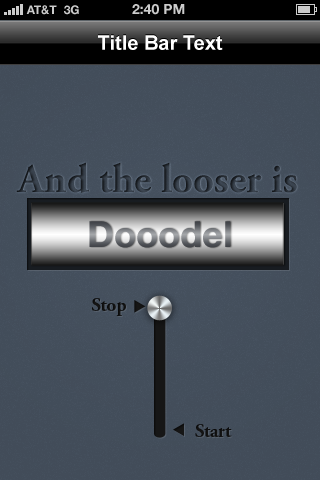
<style>
.page{position:relative;width:320px;height:480px}
.page>*{position:absolute;margin:0}
.t1{font:12px "HelveticaNeue-Bold";color:#cccccc}
.t2{font:14px "HelveticaNeue-Bold";color:#cccccc}
.t3{font:20px "Arial-BoldMT";color:#ffffff}
.t4{font:36px "HelveticaNeue-Bold";color:#ffffff}
</style>
<div class="page">
<p class="t1" style="left:26px;top:5px;width:31px;height:10px">AT&amp;T</p>
<p class="t1" style="left:64px;top:5px;width:15px;height:10px">3G</p>
<p class="t2" style="left:132px;top:4px;width:53px;height:11px">2:40 PM</p>
<p class="t3" style="left:98px;top:35px;width:125px;height:15px">Title Bar Text</p>
<p class="t4" style="left:89px;top:221px;width:142px;height:27px">Dooodel</p>
</div>
